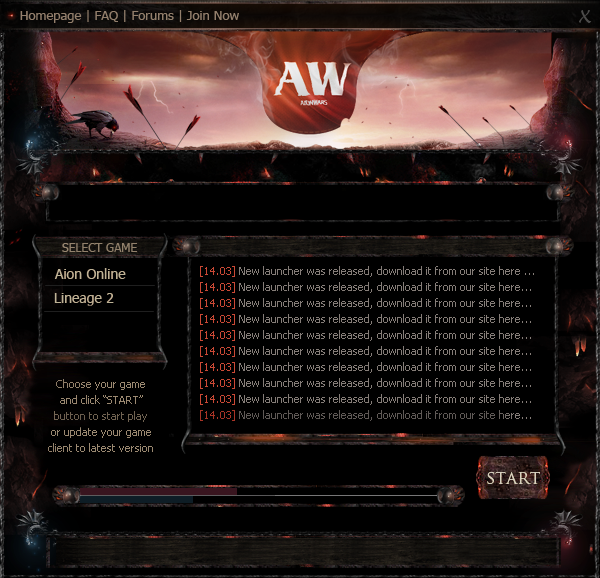
<style>
.page{position:relative;width:600px;height:578px;background:#000000}
.page>*{position:absolute;margin:0}
.t1{font:13px "Tahoma";color:#937f6c}
.t2{font:18px "LucidaHandwriting-Italic";color:#4d4c4b}
.t3{font:12px "Tahoma";color:#91806b}
.t4{font:14px "Tahoma";color:#bdb396}
.t5{font:11px/16px "Tahoma";color:#857d78}
.t6{font:11px/16px "Tahoma";color:#9b8971}
.t7{font:16px "TrajanPro-Regular";color:#d7d1c0}
</style>
<div class="page">
<p class="t1" style="left:20px;top:10px;width:219px;height:13px">Homepage | FAQ | Forums | Join Now</p>
<p class="t2" style="left:579px;top:10px;width:13px;height:13px">X</p>
<p class="t3" style="left:62px;top:243px;width:75px;height:9px">SELECT GAME</p>
<p class="t4" style="left:54px;top:268px;width:72px;height:11px">Aion Online</p>
<p class="t5" style="left:200px;top:266px;width:334px;height:155px">[14.03] New launcher was released, download it from our site here ...<br>[14.03] New launcher was released, download it from our site here...<br>[14.03] New launcher was released, download it from our site here...<br>[14.03] New launcher was released, download it from our site here...<br>[14.03] New launcher was released, download it from our site here...<br>[14.03] New launcher was released, download it from our site here...<br>[14.03] New launcher was released, download it from our site here...<br>[14.03] New launcher was released, download it from our site here...<br>[14.03] New launcher was released, download it from our site here...<br>[14.03] New launcher was released, download it from our site here...</p>
<p class="t4" style="left:54px;top:293px;width:60px;height:13px">Lineage 2</p>
<p class="t6" style="left:48px;top:379px;width:105px;height:73px;text-align:center">Choose your game<br>and click “START”<br>button to start play<br>or update your game<br>client to latest version</p>
<p class="t7" style="left:487px;top:471px;width:53px;height:13px">START</p>
</div>
